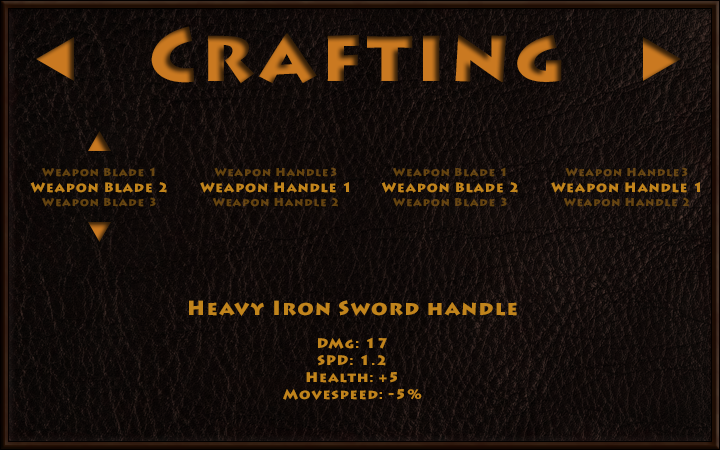
<style>
.page{position:relative;width:720px;height:450px}
.page>*{position:absolute;margin:0}
.t1{font:75px "LithosPro-Black";letter-spacing:0.06em}
.t2{font:11.4px "LithosPro-Black";letter-spacing:0.06em;color:#644310}
.t3{font:11.4px "LithosPro-Black";letter-spacing:0.06em;color:#64430f}
.t4{font:11.4px "LithosPro-Black";letter-spacing:0.06em;color:#654411}
.t5{font:11.4px "LithosPro-Black";letter-spacing:0.06em;color:#664512}
.t6{font:13.7px "LithosPro-Black";letter-spacing:0.06em;color:#c1841c}
.t7{font:11.4px "LithosPro-Black";letter-spacing:0.06em;color:#c1841c}
.t8{font:14px "LithosPro-Black";letter-spacing:0.06em;color:#c1841c}
.t9{font:20px "LithosPro-Black";letter-spacing:0.06em;color:#c1841c}
</style>
<div class="page">
<p class="t1" style="left:151px;top:26px;width:411px;height:58px">Crafting</p>
<p class="t2" style="left:42px;top:167px;width:114px;height:40px;text-align:center">Weapon Blade 1<br><br>Weapon Blade 3</p>
<p class="t3" style="left:212px;top:167px;width:126px;height:40px;text-align:center">Weapon Handle3<br><br>Weapon Handle 2</p>
<p class="t4" style="left:393px;top:167px;width:114px;height:40px;text-align:center">Weapon Blade 1<br><br>Weapon Blade 3</p>
<p class="t5" style="left:563px;top:167px;width:126px;height:40px;text-align:center">Weapon Handle3<br><br>Weapon Handle 2</p>
<p class="t6" style="left:30px;top:182px;width:137px;height:11px"><span class="t7"><br></span>Weapon Blade 2</p>
<p class="t6" style="left:200px;top:182px;width:149px;height:11px"><span class="t7"><br></span>Weapon Handle 1</p>
<p class="t6" style="left:381px;top:182px;width:137px;height:11px"><span class="t7"><br></span>Weapon Blade 2</p>
<p class="t6" style="left:551px;top:182px;width:149px;height:11px"><span class="t7"><br></span>Weapon Handle 1</p>
<p class="t8" style="left:189px;top:300px;width:328px;height:100px;text-align:center"><span class="t9">Heavy Iron Sword handle<br></span><br>DMg: 17<br>SPD: 1.2<br>Health: +5<br>Movespeed: -5%</p>
</div>
